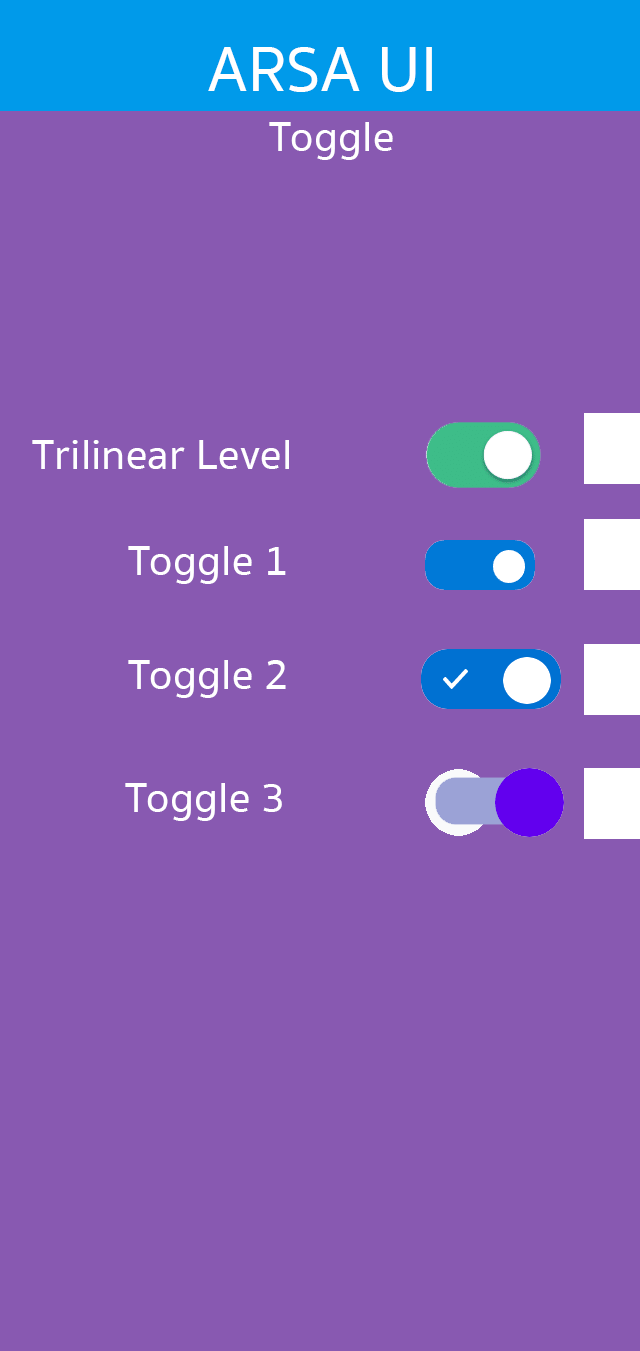
<style>
.page{position:relative;width:640px;height:1351px;background:#8859b1}
.page>*{position:absolute;margin:0}
.t1{font:65.3px "SukhumvitSet-Medium";color:#ffffff}
.t2{font:43.4px "SukhumvitSet-Medium";color:#ffffff}
</style>
<div class="page">
<p class="t1" style="left:208px;top:47px;width:224px;height:45px">ARSA UI</p>
<p class="t2" style="left:269px;top:122px;width:124px;height:38px">Toggle</p>
<p class="t2" style="left:32px;top:440px;width:257px;height:29px">Trilinear Level</p>
<p class="t2" style="left:128px;top:546px;width:158px;height:38px">Toggle 1</p>
<p class="t2" style="left:128px;top:660px;width:158px;height:38px">Toggle 2</p>
<p class="t2" style="left:125px;top:783px;width:157px;height:38px">Toggle 3</p>
</div>
